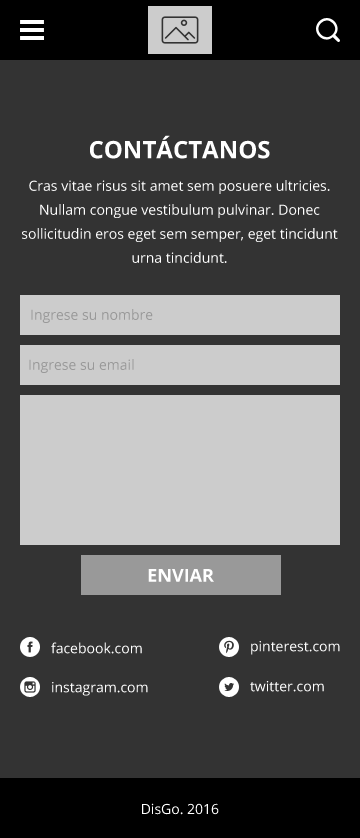
<style>
.page{position:relative;width:360px;height:838px;background:#333333}
.page>*{position:absolute;margin:0}
.t1{font:24px "OpenSans-Bold";color:#ffffff}
.t2{font:14px/24px "OpenSans";color:#ffffff}
.t3{font:14px "OpenSans";color:#999999}
.t4{font:18px "OpenSans-Bold";color:#ffffff;text-transform:uppercase}
.t5{font:14px "OpenSans";color:#ffffff}
</style>
<div class="page">
<p class="t1" style="left:90px;top:135px;width:180px;height:24px">CONTÁCTANOS</p>
<p class="t2" style="left:22px;top:180px;width:316px;height:83px;text-align:center">Cras vitae risus sit amet sem posuere ultricies. Nullam congue vestibulum pulvinar. Donec sollicitudin eros eget sem semper, eget tincidunt urna tincidunt.</p>
<p class="t3" style="left:31px;top:309px;width:122px;height:14px">Ingrese su nombre</p>
<p class="t3" style="left:29px;top:359px;width:105px;height:14px">Ingrese su email</p>
<p class="t4" style="left:148px;top:569px;width:66px;height:13px">Enviar</p>
<p class="t5" style="left:251px;top:641px;width:89px;height:14px">pinterest.com</p>
<p class="t5" style="left:51px;top:642px;width:91px;height:12px">facebook.com</p>
<p class="t5" style="left:52px;top:682px;width:96px;height:14px">instagram.com</p>
<p class="t5" style="left:250px;top:681px;width:74px;height:11px">twitter.com</p>
<p class="t5" style="left:142px;top:803px;width:77px;height:12px">DisGo. 2016</p>
</div>
